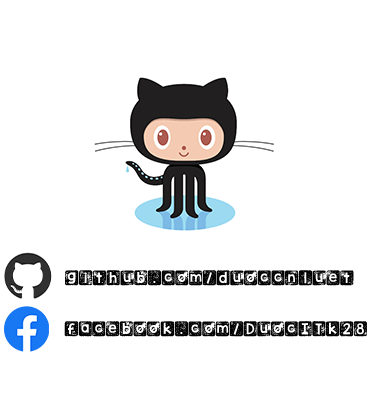
<style>
.page{position:relative;width:370px;height:409px;background:#ffffff}
.page>*{position:absolute;margin:0}
.t1{font:20.8px "KGThankYouStamp";color:#000000}
</style>
<div class="page">
<p class="t1" style="left:65px;top:270px;width:289px;height:16px">github.com/duoccn1uet</p>
<p class="t1" style="left:64px;top:321px;width:303px;height:16px">facebook.com/DuocITk28</p>
</div>
